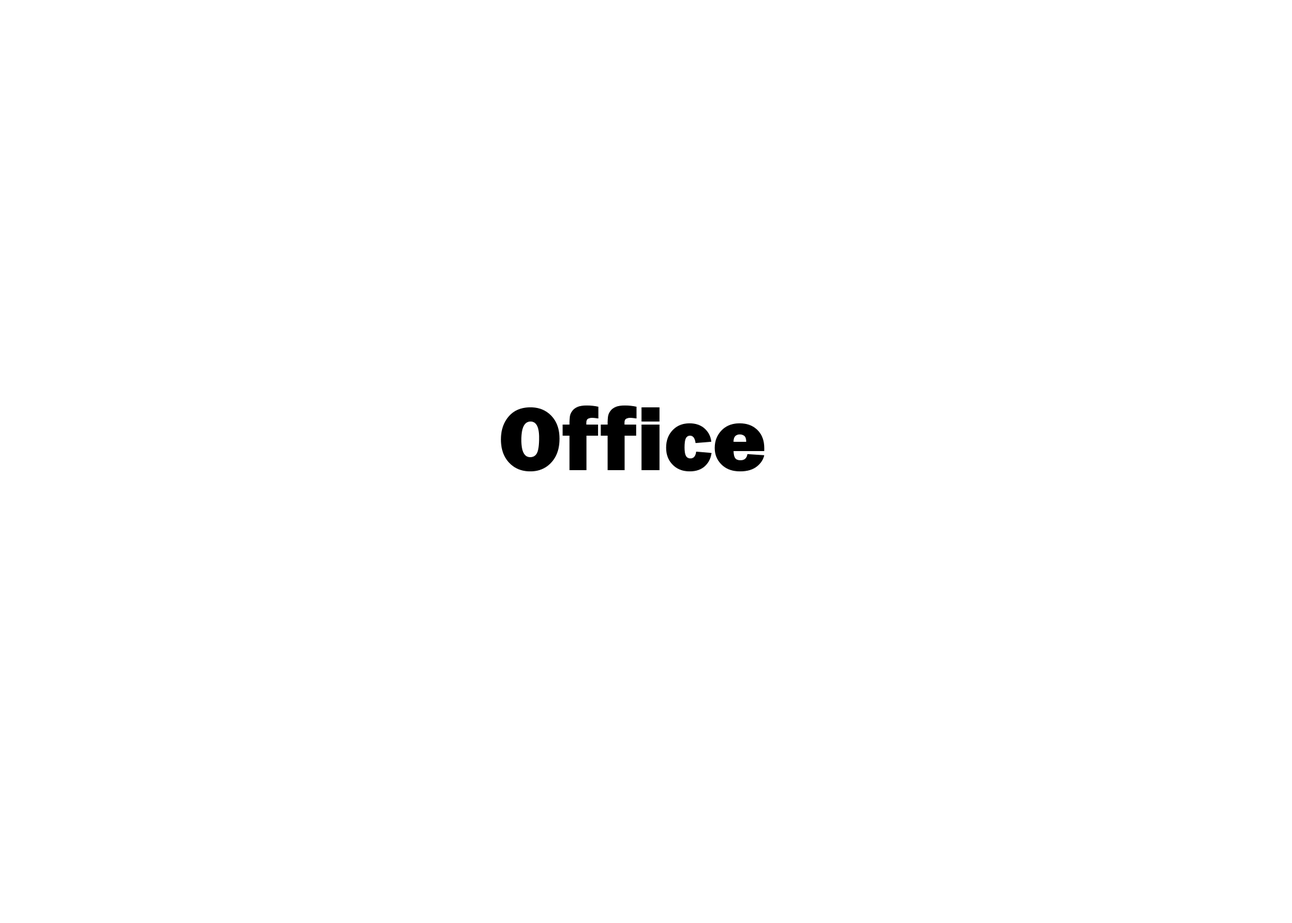
<style>
.page{position:relative;width:1292px;height:923px;background:#ffffff}
.page>*{position:absolute;margin:0}
.t1{font:92.3px "FranklinGothic-Heavy";color:#000000}
</style>
<div class="page">
<p class="t1" style="left:501px;top:405px;width:264px;height:66px">Office</p>
</div>
